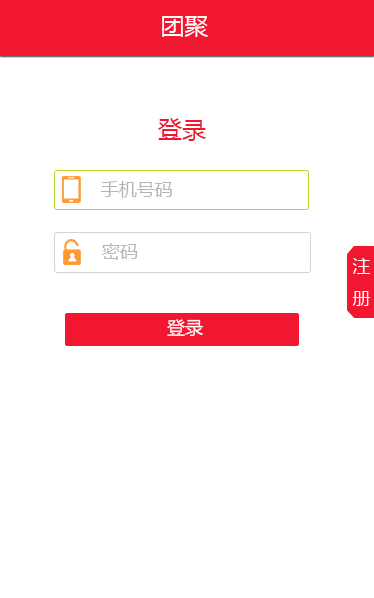
<style>
.page{position:relative;width:374px;height:598px;background:#ffffff}
.page>*{position:absolute;margin:0}
.t1{font:24px "MicrosoftYaHei";color:#ffffff}
.t2{font:24px "MicrosoftYaHei";color:#f11731}
.t3{font:18px "MicrosoftYaHei";color:#bbb3b3}
.t4{font:18px "MicrosoftYaHei";color:#fefefe}
</style>
<div class="page">
<p class="t1" style="left:162px;top:16px;width:46px;height:21px">团聚</p>
<p class="t2" style="left:158px;top:118px;width:48px;height:23px">登录</p>
<p class="t3" style="left:101px;top:181px;width:71px;height:17px">手机号码</p>
<p class="t3" style="left:102px;top:243px;width:36px;height:17px">密码</p>
<p class="t4" style="left:167px;top:319px;width:36px;height:18px">登录</p>
</div>
